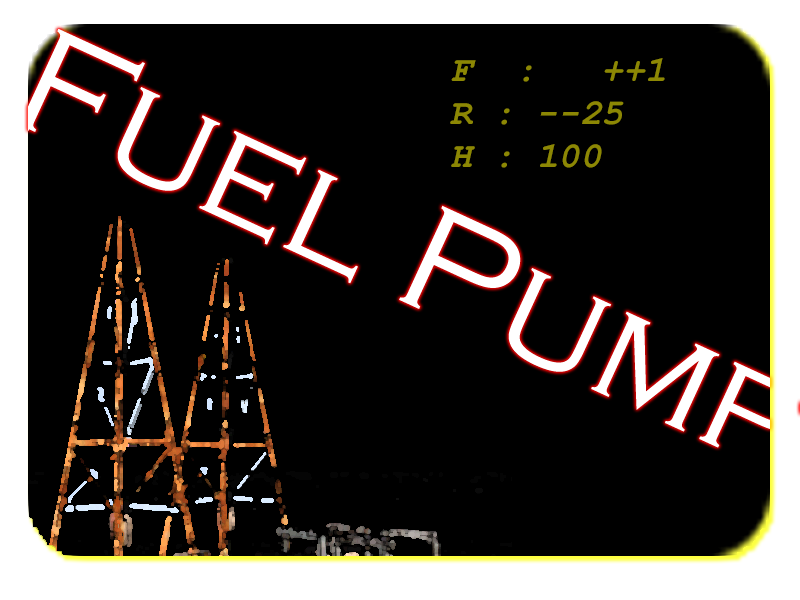
<style>
.page{position:relative;width:800px;height:600px;background:#000000}
.page>*{position:absolute;margin:0}
.t1{font:36px "CourierNewPS-BoldItalicMT";color:#8c8704}
</style>
<div class="page">
<p class="t1" style="left:450px;top:58px;width:215px;height:110px">F  :   ++1<br>R : --25<br>H : 100</p>
</div>
